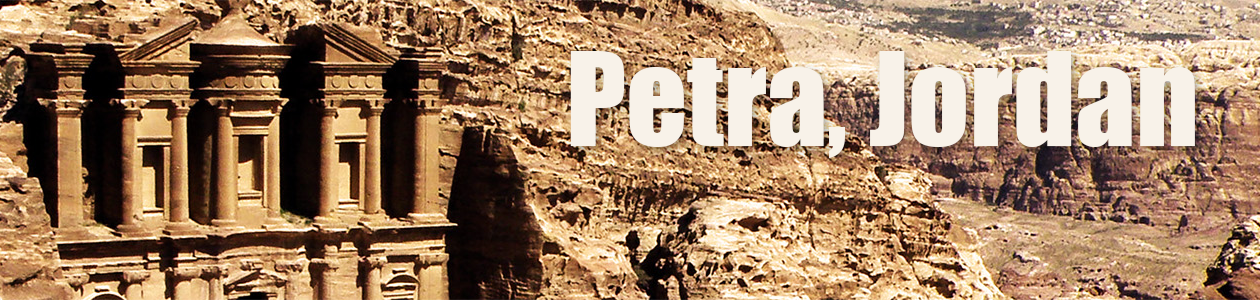
<style>
.page{position:relative;width:1260px;height:300px}
.page>*{position:absolute;margin:0}
.t1{font:120px "Impact";color:#f8f2e9}
</style>
<div class="page">
<p class="t1" style="left:570px;top:51px;width:625px;height:107px">Petra, Jordan</p>
</div>
